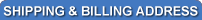
<style>
.page{position:relative;width:202px;height:20px;background:#4379c1}
.page>*{position:absolute;margin:0}
.t1{font:12.8px "Arial-BoldMT";color:#ffffff}
</style>
<div class="page">
<p class="t1" style="left:3px;top:6px;width:195px;height:10px">SHIPPING &amp; BILLING ADDRESS</p>
</div>
